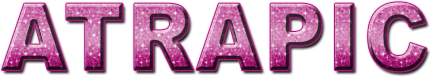
<style>
.page{position:relative;width:431px;height:77px;background:#ffffff}
.page>*{position:absolute;margin:0}
.t1{font:92.6px "Arial-Black";letter-spacing:0.04em;scale:0.9 1}
</style>
<div class="page">
<p class="t1" style="left:2px;top:2px;width:425px;height:70px">ATRAPIC</p>
</div>
